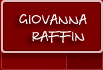
<style>
.page{position:relative;width:103px;height:70px;background:#7c0000}
.page>*{position:absolute;margin:0}
.t1{font:14px "BetinaScript";color:#ffffff}
.t2{font:11px "Tahoma";color:#ffffff}
</style>
<div class="page">
<p class="t1" style="left:19px;top:14px;width:68px;height:29px"><span class="t2">  </span>GIOVANNA <br>    RAFFIN</p>
</div>
